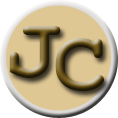
<style>
.page{position:relative;width:118px;height:118px;background:#dfc793}
.page>*{position:absolute;margin:0}
.t1{font:90px "CourierNewPS-BoldMT";color:#745b1b}
</style>
<div class="page">
<p class="t1" style="left:9px;top:26px;width:52px;height:52px">J</p>
<p class="t1" style="left:55px;top:38px;width:49px;height:53px">C</p>
</div>
